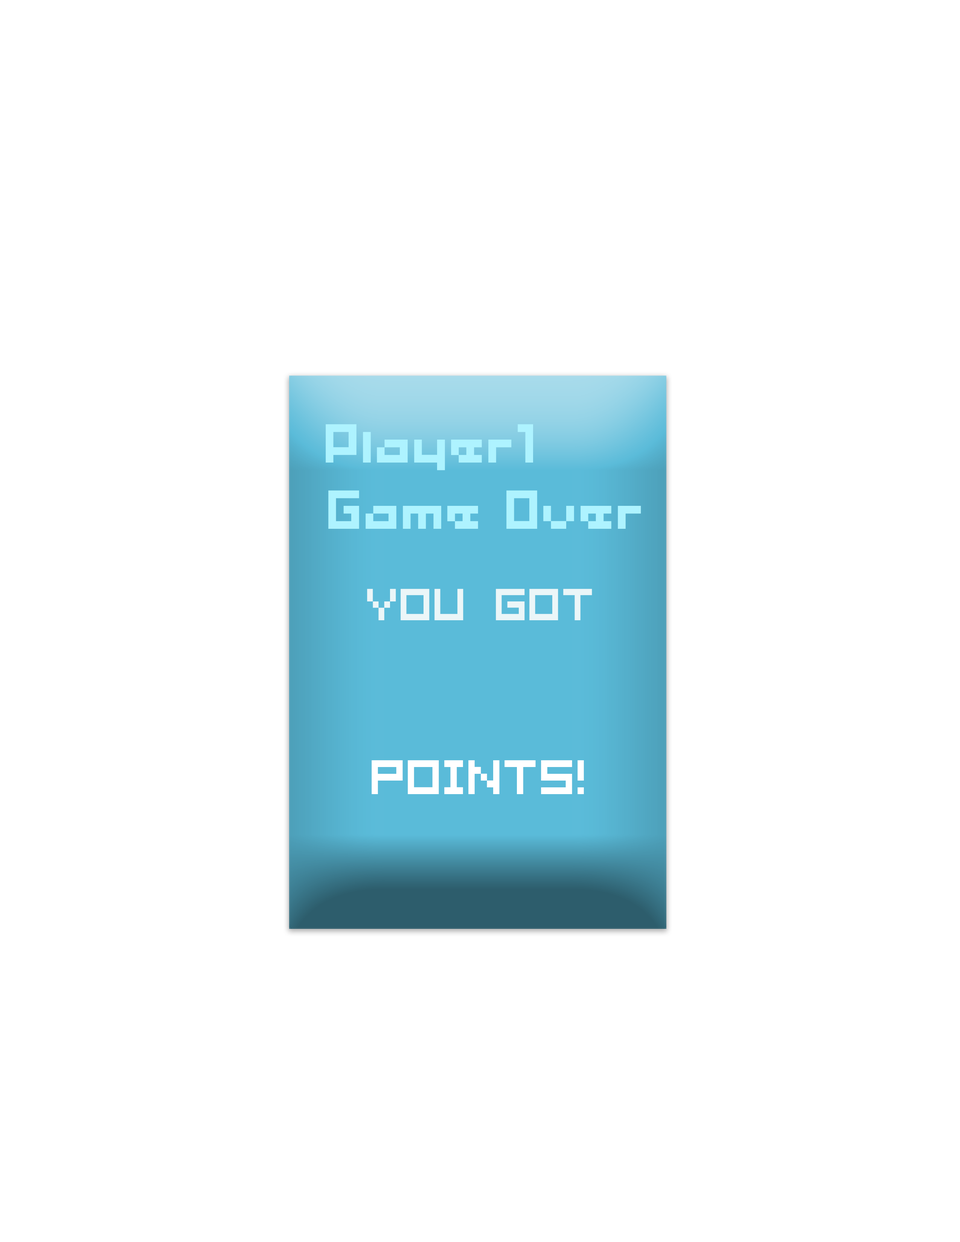
<style>
.page{position:relative;width:960px;height:1242px;background:#ffffff}
.page>*{position:absolute;margin:0}
.t1{font:61.2px "04b03b";letter-spacing:-0.019em;color:#aef3ff}
.t2{font:37.6px "04b08";letter-spacing:-0.019em;color:#ebf6f8;scale:0.91 1}
.t3{font:40.7px "04b08";letter-spacing:-0.019em;color:#ffffff;scale:0.91 1}
</style>
<div class="page">
<p class="t1" style="left:326px;top:424px;width:207px;height:47px">Player1</p>
<p class="t1" style="left:328px;top:490px;width:313px;height:39px">Game Over</p>
<p class="t2" style="left:367px;top:589px;width:225px;height:31px">You got</p>
<p class="t3" style="left:372px;top:760px;width:212px;height:34px">POINTS!</p>
</div>
